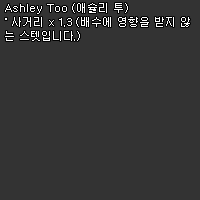
<style>
.page{position:relative;width:200px;height:200px;background:#333333}
.page>*{position:absolute;margin:0}
.t1{font:11px/14px "Dotum";color:#ffffff}
</style>
<div class="page">
<p class="t1" style="left:5px;top:3px;width:185px;height:38px">Ashley Too (애슐리 투)<br>˚ 사거리 x 1.3 (배수에 영향을 받지 않<br>는 스텟입니다.)</p>
</div>
